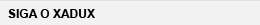
<style>
.page{position:relative;width:260px;height:25px;background:#f2f2f2}
.page>*{position:absolute;margin:0}
.t1{font:12px "Arial-BoldMT";color:#000000}
</style>
<div class="page">
<p class="t1" style="left:8px;top:9px;width:87px;height:9px">SIGA O XADUX</p>
</div>
